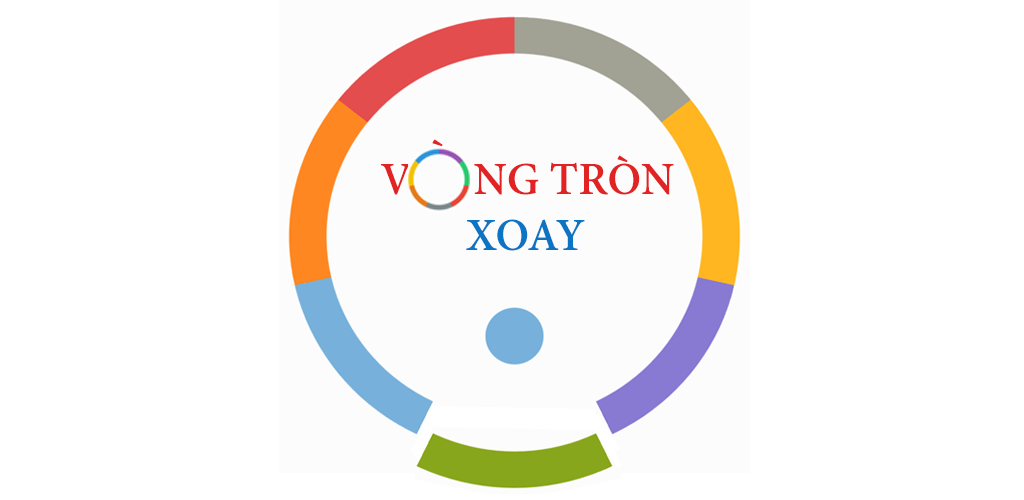
<style>
.page{position:relative;width:1024px;height:500px;background:#ffffff}
.page>*{position:absolute;margin:0}
.t1{font:50px "AdobeGurmukhi-Bold";color:#e12323}
.t2{font:50px "AdobeGurmukhi-Bold";color:#0d74c3}
</style>
<div class="page">
<p class="t1" style="left:381px;top:155px;width:293px;height:40px">V      NG TRÒN</p>
<p class="t2" style="left:466px;top:219px;width:119px;height:32px">XOAY</p>
</div>
